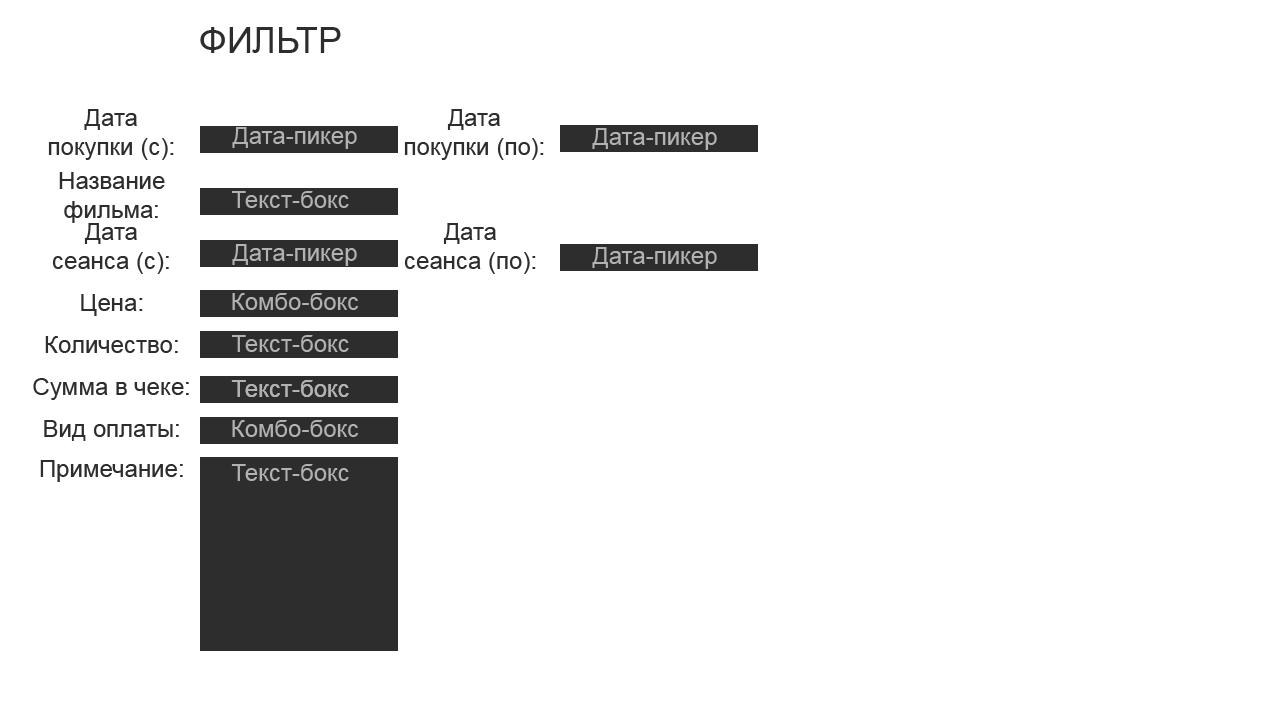
<style>
.page{position:relative;width:1280px;height:720px;background:#ffffff}
.page>*{position:absolute;margin:0}
.t1{font:36px "ArialMT";color:#2d2d2d}
.t2{font:23.9px "ArialMT";color:#2d2d2d}
.t3{font:24px "ArialMT";color:#b2b2b2}
</style>
<div class="page">
<p class="t1" style="left:200px;top:27px;width:141px;height:26px">ФИЛЬТР</p>
<p class="t2" style="left:48px;top:109px;width:126px;height:51px;text-align:center">Дата<br>покупки (с):</p>
<p class="t2" style="left:404px;top:109px;width:140px;height:51px;text-align:center">Дата<br>покупки (по):</p>
<p class="t3" style="left:232px;top:127px;width:125px;height:22px">Дата-пикер</p>
<p class="t3" style="left:592px;top:128px;width:125px;height:22px">Дата-пикер</p>
<p class="t2" style="left:59px;top:172px;width:106px;height:51px;text-align:center">Название<br>фильма:</p>
<p class="t3" style="left:231px;top:191px;width:118px;height:17px">Текст-бокс</p>
<p class="t2" style="left:52px;top:223px;width:117px;height:51px;text-align:center">Дата<br>сеанса (с):</p>
<p class="t2" style="left:404px;top:223px;width:132px;height:51px;text-align:center">Дата<br>сеанса (по):</p>
<p class="t3" style="left:232px;top:244px;width:125px;height:22px">Дата-пикер</p>
<p class="t3" style="left:592px;top:247px;width:125px;height:22px">Дата-пикер</p>
<p class="t2" style="left:81px;top:294px;width:62px;height:22px">Цена:</p>
<p class="t3" style="left:232px;top:293px;width:126px;height:17px">Комбо-бокс</p>
<p class="t2" style="left:45px;top:336px;width:133px;height:17px">Количество:</p>
<p class="t3" style="left:231px;top:335px;width:118px;height:17px">Текст-бокс</p>
<p class="t2" style="left:33px;top:378px;width:156px;height:22px">Сумма в чеке:</p>
<p class="t3" style="left:231px;top:380px;width:118px;height:17px">Текст-бокс</p>
<p class="t3" style="left:231px;top:380px;width:118px;height:17px">Текст-бокс</p>
<p class="t2" style="left:44px;top:420px;width:135px;height:21px">Вид оплаты:</p>
<p class="t3" style="left:232px;top:420px;width:126px;height:17px">Комбо-бокс</p>
<p class="t2" style="left:40px;top:460px;width:143px;height:22px">Примечание:</p>
<p class="t3" style="left:231px;top:464px;width:118px;height:17px">Текст-бокс</p>
</div>
